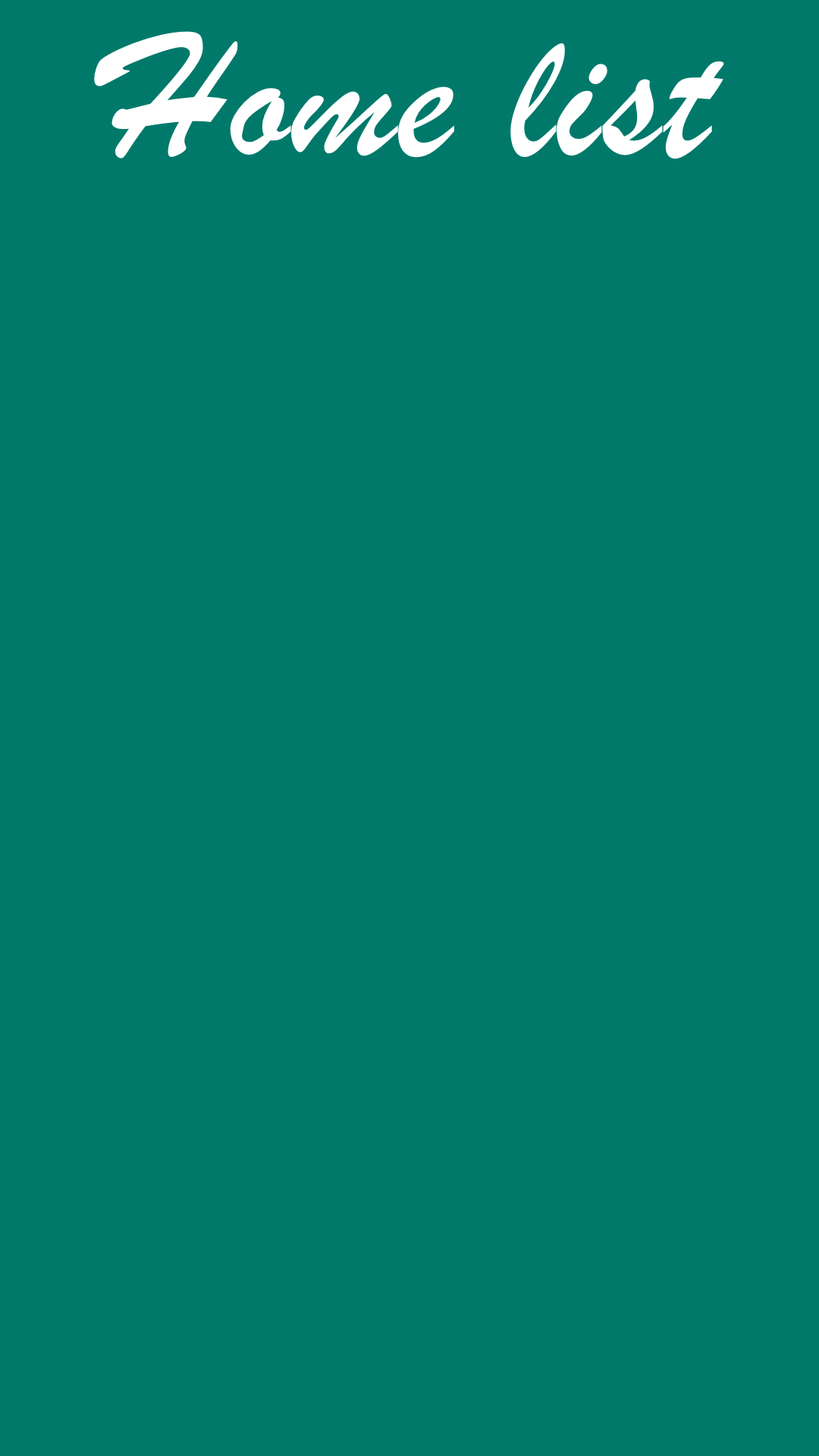
<style>
.page{position:relative;width:819px;height:1456px;background:#00796b}
.page>*{position:absolute;margin:0}
.t1{font:189.6px "BrushScriptMT";letter-spacing:0.011em;color:#ffffff}
</style>
<div class="page">
<p class="t1" style="left:94px;top:31px;width:630px;height:128px">Home list</p>
</div>
